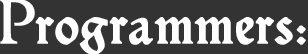
<style>
.page{position:relative;width:308px;height:54px;background:#333333}
.page>*{position:absolute;margin:0}
.t1{font:62.5px "Hamlet-Tertia18";color:#ffffff;font-weight:bold}
</style>
<div class="page">
<p class="t1" style="left:0px;top:0px;width:306px;height:55px">Programmers:</p>
</div>
